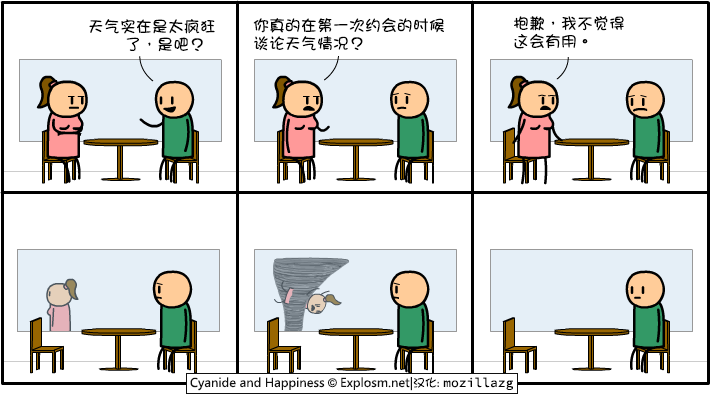
<style>
.page{position:relative;width:711px;height:395px;background:#ffffff}
.page>*{position:absolute;margin:0}
.t1{font:16px/18px "DFGirl";color:#000000}
</style>
<div class="page">
<p class="t1" style="left:253px;top:17px;width:191px;height:34px">你真的在第一次约会的时候<br>谈论天气情况？</p>
<p class="t1" style="left:514px;top:16px;width:110px;height:33px">抱歉，我不觉得<br>这会有用。</p>
<p class="t1" style="left:89px;top:19px;width:126px;height:33px">天气实在是太疯狂<br>       了，是吧？</p>
</div>
